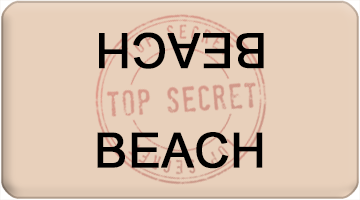
<style>
.page{position:relative;width:360px;height:200px;background:#e8d0bb}
.page>*{position:absolute;margin:0}
.t1{font:48px "ArialMT";color:#000000;font-weight:bold}
</style>
<div class="page">
<p class="t1" style="left:99px;top:32px;width:165px;height:37px;rotate:180deg">BEACH</p>
<p class="t1" style="left:97px;top:132px;width:166px;height:37px">BEACH</p>
</div>
